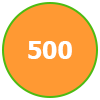
<style>
.page{position:relative;width:100px;height:100px;background:#ff9933}
.page>*{position:absolute;margin:0}
.t1{font:24px "Tahoma-Bold";color:#ffffff}
</style>
<div class="page">
<p class="t1" style="left:28px;top:41px;width:44px;height:18px">500</p>
</div>
